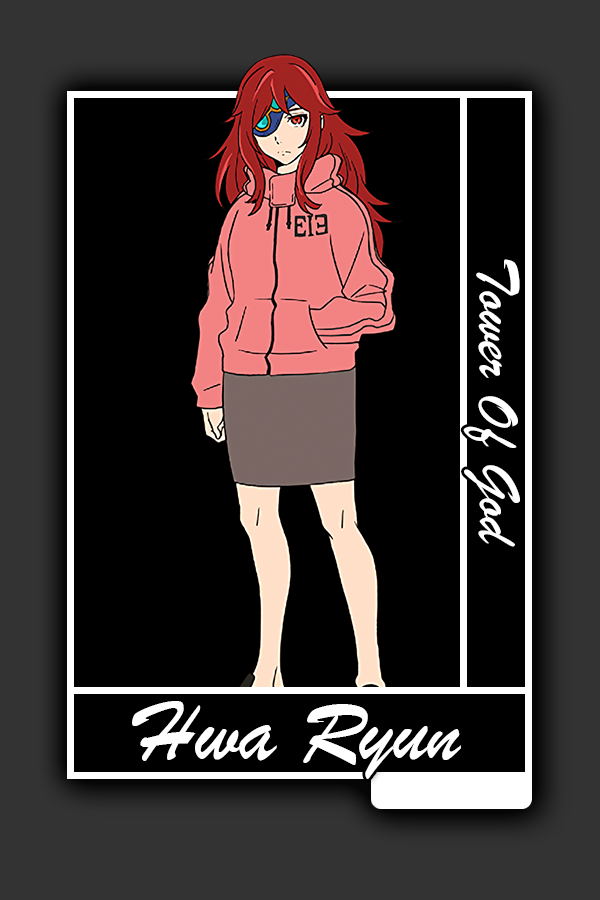
<style>
.page{position:relative;width:600px;height:900px;background:#000000}
.page>*{position:absolute;margin:0}
.t1{font:61.5px "BrushScriptMT";color:#ffffff}
.t2{font:89.7px "BrushScriptMT";color:#ffffff}
</style>
<div class="page">
<p class="t1" style="left:463px;top:259px;width:57px;height:288px;rotate:90deg">Tower Of God</p>
<p class="t2" style="left:132px;top:701px;width:329px;height:78px">Hwa Ryun</p>
</div>
